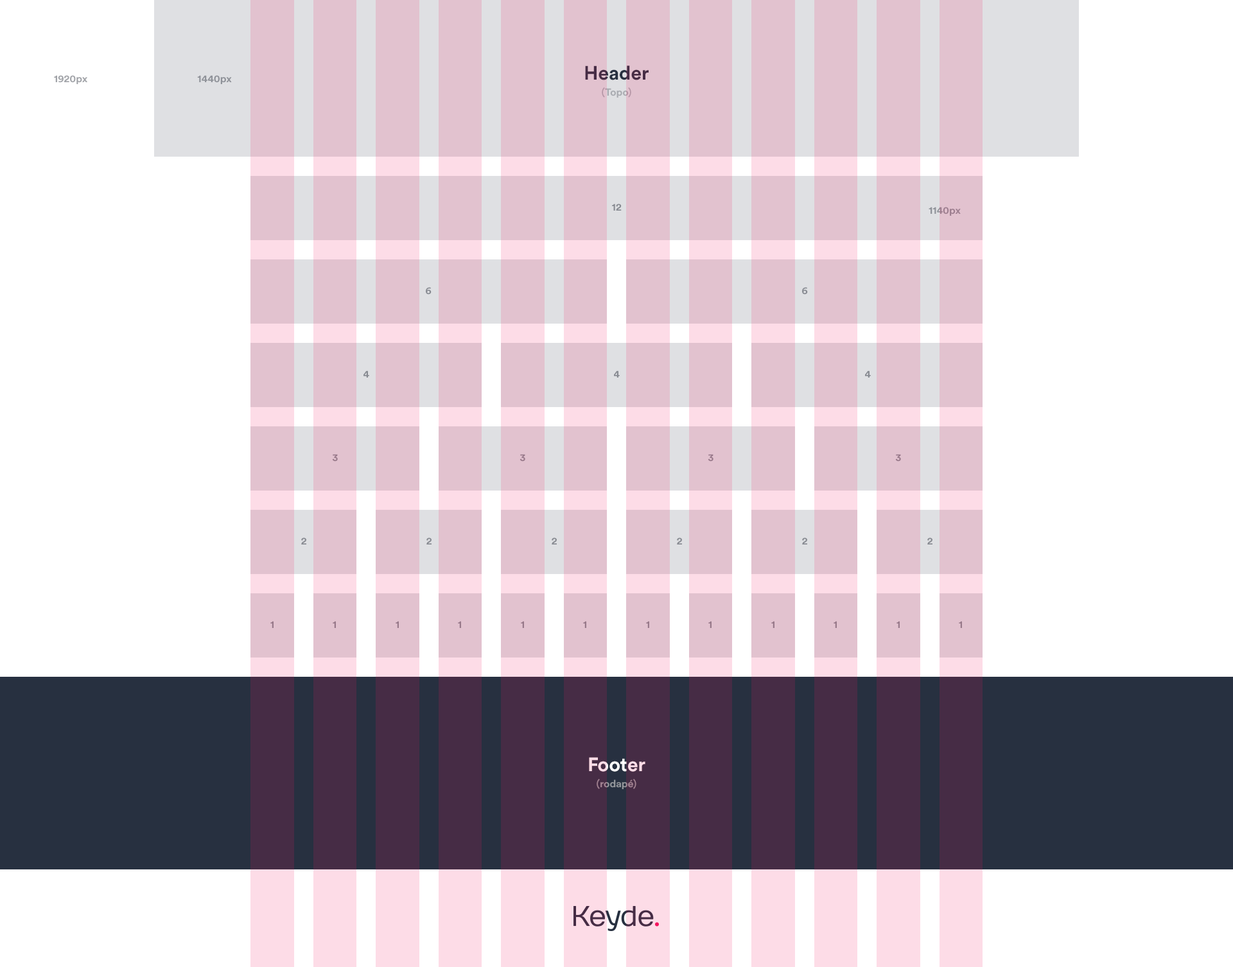
<style>
.page{position:relative;width:1233px;height:967px;background:#ffffff}
.page>*{position:absolute;margin:0}
.t1{font:19.3px "CircularStd-Bold";color:#462c45}
.t2{font:10.3px "CircularStd-Bold";color:#a2a4a9}
.t3{font:10.3px "CircularStd-Bold";color:#8f9299}
.t4{font:10.3px "CircularStd-Bold"}
.t5{font:10.3px "CircularStd-Bold";color:#888b92;text-transform:uppercase}
.t6{font:10.3px "CircularStd-Bold";color:#9e7f90}
.t7{font:10.3px "CircularStd-Bold";color:#98798a;text-transform:uppercase}
.t8{font:19.3px "CircularStd-Bold"}
.t9{font:10.3px "CircularStd-Bold";color:#92959a}
</style>
<div class="page">
<p class="t1" style="left:585px;top:66px;width:64px;height:14px">Header</p>
<p class="t2" style="left:54px;top:75px;width:33px;height:9px">1920px</p>
<p class="t3" style="left:197px;top:75px;width:35px;height:9px">1440px</p>
<p class="t4" style="left:602px;top:87px;width:29px;height:11px">(Topo)</p>
<p class="t5" style="left:612px;top:204px;width:10px;height:7px">12</p>
<p class="t6" style="left:929px;top:207px;width:32px;height:9px">1140px</p>
<p class="t5" style="left:426px;top:287px;width:6px;height:8px">6</p>
<p class="t5" style="left:802px;top:287px;width:6px;height:8px">6</p>
<p class="t5" style="left:363px;top:371px;width:6px;height:7px">4</p>
<p class="t5" style="left:614px;top:371px;width:6px;height:7px">4</p>
<p class="t5" style="left:865px;top:371px;width:6px;height:7px">4</p>
<p class="t7" style="left:332px;top:454px;width:6px;height:8px">3</p>
<p class="t7" style="left:520px;top:454px;width:5px;height:8px">3</p>
<p class="t7" style="left:708px;top:454px;width:5px;height:8px">3</p>
<p class="t7" style="left:895px;top:454px;width:6px;height:8px">3</p>
<p class="t5" style="left:301px;top:538px;width:5px;height:7px">2</p>
<p class="t5" style="left:426px;top:538px;width:6px;height:7px">2</p>
<p class="t5" style="left:552px;top:538px;width:5px;height:7px">2</p>
<p class="t5" style="left:677px;top:538px;width:5px;height:7px">2</p>
<p class="t5" style="left:802px;top:538px;width:5px;height:7px">2</p>
<p class="t5" style="left:927px;top:538px;width:5px;height:7px">2</p>
<p class="t7" style="left:270px;top:621px;width:4px;height:7px">1</p>
<p class="t7" style="left:333px;top:621px;width:3px;height:7px">1</p>
<p class="t7" style="left:396px;top:621px;width:3px;height:7px">1</p>
<p class="t7" style="left:458px;top:621px;width:3px;height:7px">1</p>
<p class="t7" style="left:521px;top:621px;width:3px;height:7px">1</p>
<p class="t7" style="left:583px;top:621px;width:3px;height:7px">1</p>
<p class="t7" style="left:646px;top:621px;width:3px;height:7px">1</p>
<p class="t7" style="left:708px;top:621px;width:4px;height:7px">1</p>
<p class="t7" style="left:771px;top:621px;width:3px;height:7px">1</p>
<p class="t7" style="left:834px;top:621px;width:3px;height:7px">1</p>
<p class="t7" style="left:896px;top:621px;width:4px;height:7px">1</p>
<p class="t7" style="left:959px;top:621px;width:3px;height:7px">1</p>
<p class="t8" style="left:589px;top:757px;width:56px;height:15px">Footer</p>
<p class="t9" style="left:597px;top:779px;width:39px;height:10px">(rodapé)</p>
</div>
